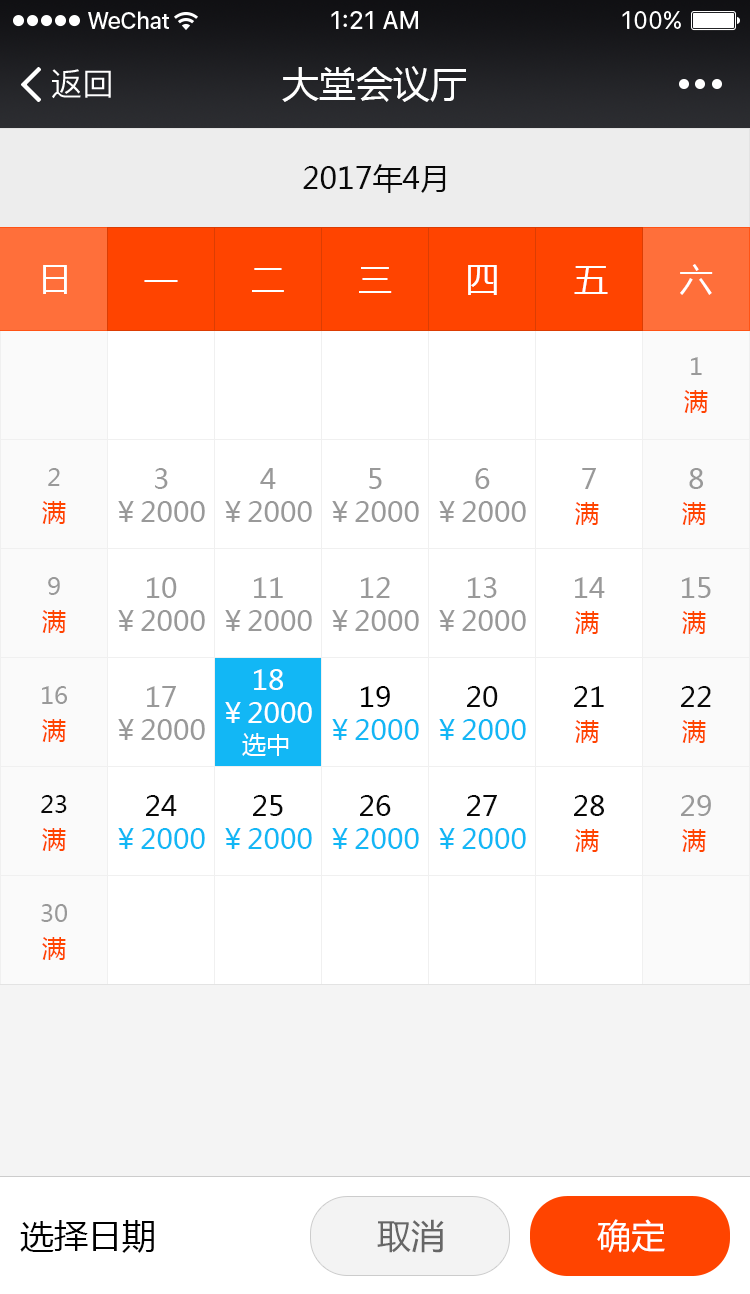
<style>
.page{position:relative;width:750px;height:1294px;background:#ffffff}
.page>*{position:absolute;margin:0}
.t1{font:32px "PingFangSC-Regular";color:#ffffff}
.t2{font:37px "MicrosoftYaHei";color:#ffffff}
.t3{font:30px "MicrosoftYaHei";color:#090909}
.t4{font:34px "MicrosoftYaHei";color:#fefefe}
.t5{font:34px "MicrosoftYaHei";color:#ffffff}
.t6{font:24px "MicrosoftYaHei";color:#999999}
.t7{font:24px "MicrosoftYaHei";color:#ff4400}
.t8{font:28px "MicrosoftYaHei";color:#999999}
.t9{font:28px "MicrosoftYaHei";color:#ffffff}
.t10{font:28px "MicrosoftYaHei";color:#000000}
.t11{font:28px "MicrosoftYaHei";color:#090909}
.t12{font:28px "MicrosoftYaHei";color:#12b7f5}
.t13{font:24px "MicrosoftYaHei";color:#ffffff}
.t14{font:24px "MicrosoftYaHei";color:#090909}
.t15{font:34px "MicrosoftYaHei";color:#000000}
.t16{font:34px "MicrosoftYaHei";color:#666666}
</style>
<div class="page">
<p class="t1" style="left:52px;top:69px;width:59px;height:30px">返回</p>
<p class="t2" style="left:282px;top:66px;width:184px;height:36px">大堂会议厅</p>
<p class="t3" style="left:303px;top:164px;width:143px;height:29px">2017年4月</p>
<p class="t4" style="left:43px;top:265px;width:24px;height:29px">日</p>
<p class="t5" style="left:43px;top:265px;width:24px;height:29px">日</p>
<p class="t5" style="left:252px;top:268px;width:32px;height:24px">二</p>
<p class="t5" style="left:252px;top:268px;width:32px;height:24px">二</p>
<p class="t5" style="left:359px;top:267px;width:33px;height:26px">三</p>
<p class="t5" style="left:359px;top:267px;width:33px;height:26px">三</p>
<p class="t5" style="left:468px;top:265px;width:29px;height:30px">四</p>
<p class="t5" style="left:468px;top:265px;width:29px;height:30px">四</p>
<p class="t5" style="left:574px;top:266px;width:34px;height:28px">五</p>
<p class="t5" style="left:574px;top:266px;width:34px;height:28px">五</p>
<p class="t5" style="left:680px;top:264px;width:33px;height:31px">六</p>
<p class="t5" style="left:680px;top:264px;width:33px;height:31px">六</p>
<p class="t5" style="left:144px;top:280px;width:34px;height:2px">一</p>
<p class="t5" style="left:144px;top:280px;width:34px;height:2px">一</p>
<p class="t6" style="left:691px;top:357px;width:11px;height:18px">1</p>
<p class="t7" style="left:684px;top:390px;width:24px;height:23px">满</p>
<p class="t6" style="left:48px;top:468px;width:12px;height:18px">2</p>
<p class="t8" style="left:155px;top:468px;width:13px;height:21px">3</p>
<p class="t8" style="left:260px;top:468px;width:16px;height:21px">4</p>
<p class="t8" style="left:369px;top:468px;width:13px;height:21px">5</p>
<p class="t8" style="left:475px;top:468px;width:15px;height:21px">6</p>
<p class="t8" style="left:582px;top:468px;width:14px;height:21px">7</p>
<p class="t8" style="left:689px;top:468px;width:14px;height:21px">8</p>
<p class="t7" style="left:42px;top:501px;width:24px;height:23px">满</p>
<p class="t8" style="left:118px;top:501px;width:87px;height:21px">￥2000</p>
<p class="t8" style="left:225px;top:501px;width:87px;height:21px">￥2000</p>
<p class="t8" style="left:332px;top:501px;width:87px;height:21px">￥2000</p>
<p class="t8" style="left:439px;top:501px;width:87px;height:21px">￥2000</p>
<p class="t7" style="left:575px;top:502px;width:24px;height:23px">满</p>
<p class="t7" style="left:682px;top:502px;width:24px;height:23px">满</p>
<p class="t6" style="left:48px;top:577px;width:12px;height:18px">9</p>
<p class="t8" style="left:147px;top:577px;width:30px;height:21px">10</p>
<p class="t8" style="left:254px;top:577px;width:29px;height:21px">11</p>
<p class="t8" style="left:361px;top:577px;width:29px;height:21px">12</p>
<p class="t8" style="left:468px;top:577px;width:29px;height:21px">13</p>
<p class="t8" style="left:575px;top:577px;width:30px;height:21px">14</p>
<p class="t8" style="left:682px;top:577px;width:29px;height:21px">15</p>
<p class="t7" style="left:42px;top:610px;width:24px;height:23px">满</p>
<p class="t8" style="left:118px;top:610px;width:87px;height:21px">￥2000</p>
<p class="t8" style="left:225px;top:610px;width:87px;height:21px">￥2000</p>
<p class="t8" style="left:332px;top:610px;width:87px;height:21px">￥2000</p>
<p class="t8" style="left:439px;top:610px;width:87px;height:21px">￥2000</p>
<p class="t7" style="left:575px;top:611px;width:24px;height:23px">满</p>
<p class="t7" style="left:682px;top:611px;width:24px;height:23px">满</p>
<p class="t9" style="left:254px;top:669px;width:29px;height:21px">18</p>
<p class="t6" style="left:42px;top:686px;width:25px;height:18px">16</p>
<p class="t8" style="left:147px;top:686px;width:29px;height:21px">17</p>
<p class="t10" style="left:361px;top:686px;width:29px;height:21px">19</p>
<p class="t11" style="left:467px;top:686px;width:31px;height:21px">20</p>
<p class="t11" style="left:574px;top:686px;width:30px;height:21px">21</p>
<p class="t11" style="left:681px;top:686px;width:30px;height:21px">22</p>
<p class="t9" style="left:225px;top:702px;width:87px;height:21px">￥2000</p>
<p class="t7" style="left:42px;top:719px;width:24px;height:23px">满</p>
<p class="t8" style="left:118px;top:719px;width:87px;height:21px">￥2000</p>
<p class="t12" style="left:332px;top:719px;width:87px;height:21px">￥2000</p>
<p class="t12" style="left:439px;top:719px;width:87px;height:21px">￥2000</p>
<p class="t7" style="left:575px;top:720px;width:24px;height:23px">满</p>
<p class="t7" style="left:682px;top:720px;width:24px;height:23px">满</p>
<p class="t13" style="left:242px;top:733px;width:47px;height:23px">选中</p>
<p class="t14" style="left:41px;top:795px;width:26px;height:18px">23</p>
<p class="t11" style="left:146px;top:795px;width:31px;height:21px">24</p>
<p class="t11" style="left:253px;top:795px;width:30px;height:21px">25</p>
<p class="t11" style="left:360px;top:795px;width:31px;height:21px">26</p>
<p class="t11" style="left:467px;top:795px;width:30px;height:21px">27</p>
<p class="t11" style="left:574px;top:795px;width:30px;height:21px">28</p>
<p class="t8" style="left:681px;top:795px;width:30px;height:21px">29</p>
<p class="t7" style="left:42px;top:828px;width:24px;height:23px">满</p>
<p class="t12" style="left:118px;top:828px;width:87px;height:21px">￥2000</p>
<p class="t12" style="left:225px;top:828px;width:87px;height:21px">￥2000</p>
<p class="t12" style="left:332px;top:828px;width:87px;height:21px">￥2000</p>
<p class="t12" style="left:439px;top:828px;width:87px;height:21px">￥2000</p>
<p class="t7" style="left:575px;top:829px;width:24px;height:23px">满</p>
<p class="t7" style="left:682px;top:829px;width:24px;height:23px">满</p>
<p class="t6" style="left:41px;top:904px;width:26px;height:18px">30</p>
<p class="t7" style="left:42px;top:937px;width:24px;height:23px">满</p>
<p class="t15" style="left:20px;top:1220px;width:134px;height:33px">选择日期</p>
<p class="t16" style="left:377px;top:1219px;width:67px;height:34px">取消</p>
<p class="t5" style="left:597px;top:1219px;width:68px;height:34px">确定</p>
</div>
